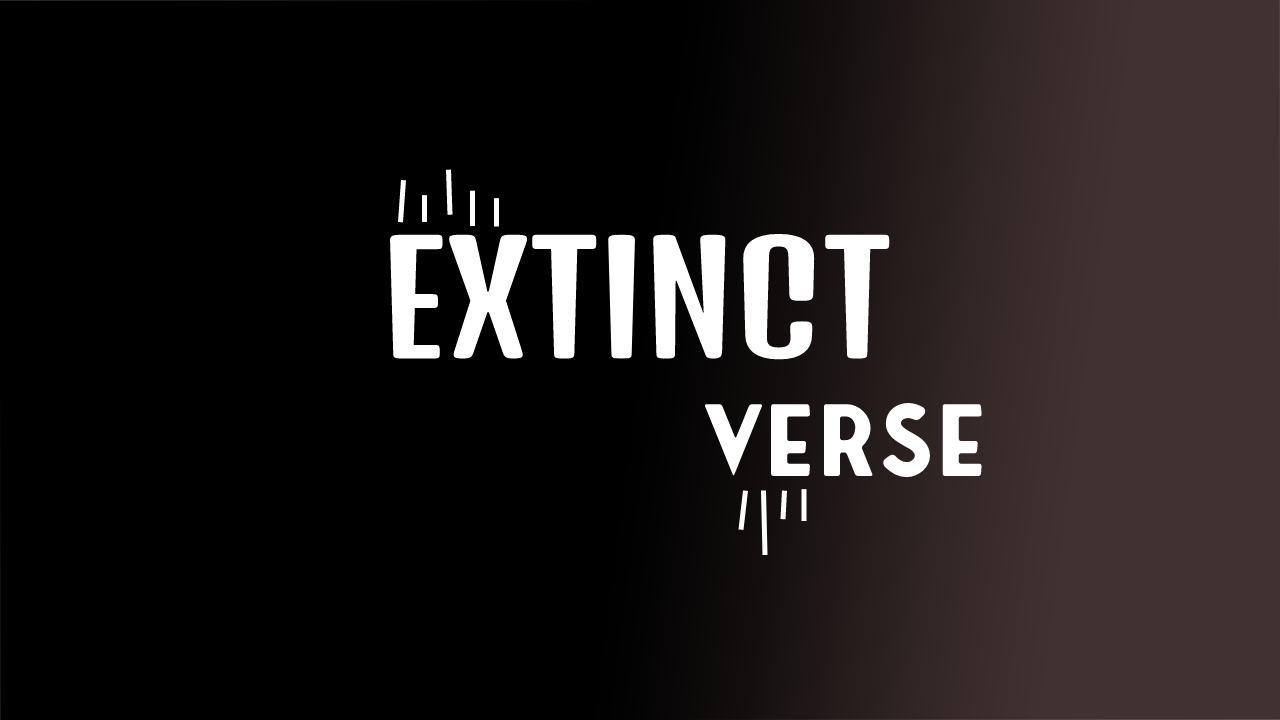
<style>
.page{position:relative;width:1280px;height:720px;background:#000000}
.page>*{position:absolute;margin:0}
.t1{font:150px "DenkOne-Regular";color:#ffffff}
.t2{font:98px "FonsecaRounded";color:#ffffff}
</style>
<div class="page">
<p class="t1" style="left:390px;top:233px;width:500px;height:127px">EXTINCT</p>
<p class="t2" style="left:704px;top:402px;width:278px;height:76px">VERSE</p>
</div>
